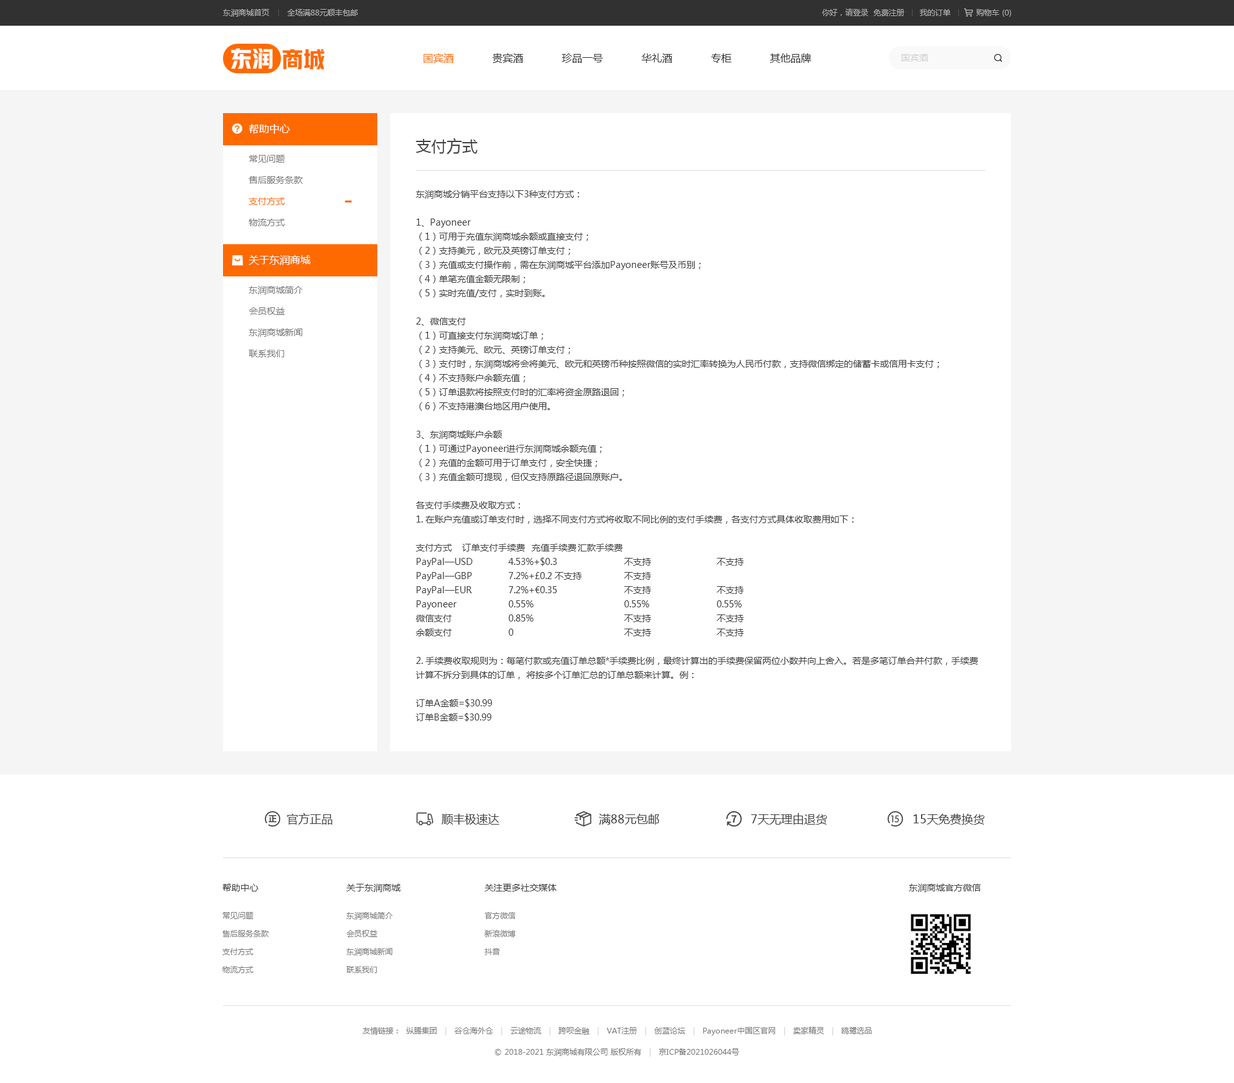
<style>
.page{position:relative;width:1234px;height:1083px;background:#ffffff}
.page>*{position:absolute;margin:0}
.t1{font:7.7px "MicrosoftYaHei";color:#b0b0b0}
.t2{font:7.7px "MicrosoftYaHei";color:#acacac}
.t3{font:21.9px "HYYakuHei-HEW";color:#ffffff}
.t4{font:21.9px "HYYakuHei-HEW";color:#ff6a00}
.t5{font:10.3px "MicrosoftYaHei";color:#333333}
.t6{font:10.3px "MicrosoftYaHei";color:#ff6a00}
.t7{font:9px "MicrosoftYaHei";color:#d2d2d2}
.t8{font:10.3px "MicrosoftYaHei";color:#ffffff}
.t9{font:15.4px "MicrosoftYaHei";color:#434343}
.t10{font:9px/21.2px "MicrosoftYaHei";color:#7d7d7d}
.t11{font:9px/21.2px "MicrosoftYaHei";color:#ff6a00}
.t12{font:9px/14.1px "MicrosoftYaHei";color:#434343}
.t13{font:11.6px "MicrosoftYaHei";color:#434343}
.t14{font:9px "MicrosoftYaHei";color:#434343}
.t15{font:7.7px/18px "MicrosoftYaHei";color:#7d7d7d}
.t16{font:7.7px "MicrosoftYaHei";color:#7d7d7d}
.t17{font:7.7px "MicrosoftYaHei";color:#d2d2d2}
</style>
<div class="page">
<p class="t1" style="left:223px;top:9px;width:135px;height:8px">东润商城首页       全场满88元顺丰包邮</p>
<p class="t2" style="left:822px;top:8px;width:190px;height:9px">你好，请登录  免费注册      我的订单          购物车 (0)</p>
<p class="t3" style="left:231px;top:48px;width:42px;height:21px">东润</p>
<p class="t4" style="left:282px;top:49px;width:43px;height:20px">商城</p>
<p class="t5" style="left:424px;top:53px;width:387px;height:10px"><span class="t6">国宾酒</span>            贵宾酒            珍品一号            华礼酒            专柜            其他品牌</p>
<p class="t7" style="left:902px;top:54px;width:26px;height:8px">国宾酒</p>
<p class="t8" style="left:249px;top:124px;width:41px;height:10px">帮助中心</p>
<p class="t9" style="left:416px;top:138px;width:62px;height:16px">支付方式</p>
<p class="t10" style="left:249px;top:155px;width:54px;height:71px">常见问题<br>售后服务条款<br><span class="t11">支付方式<br></span>物流方式</p>
<p class="t12" style="left:416px;top:190px;width:562px;height:532px">东润商城分销平台支持以下3种支付方式：<br><br>1、Payoneer<br>（1）可用于充值东润商城余额或直接支付；<br>（2）支持美元，欧元及英镑订单支付；<br>（3）充值或支付操作前，需在东润商城平台添加Payoneer账号及币别；<br>（4）单笔充值金额无限制；<br>（5）实时充值/支付，实时到账。<br><br>2、微信支付<br>（1）可直接支付东润商城订单；<br>（2）支持美元、欧元、英镑订单支付；<br>（3）支付时，东润商城将会将美元、欧元和英镑币种按照微信的实时汇率转换为人民币付款，支持微信绑定的储蓄卡或信用卡支付；<br>（4）不支持账户余额充值；<br>（5）订单退款将按照支付时的汇率将资金原路退回；<br>（6）不支持港澳台地区用户使用。<br><br>3、东润商城账户余额<br>（1）可通过Payoneer进行东润商城余额充值；<br>（2）充值的金额可用于订单支付，安全快捷；<br>（3）充值金额可提现，但仅支持原路径退回原账户。<br><br>各支付手续费及收取方式：<br>1. 在账户充值或订单支付时，选择不同支付方式将收取不同比例的支付手续费，各支付方式具体收取费用如下：<br> <br>支付方式 订单支付手续费 充值手续费 汇款手续费<br>PayPal—USD  4.53%+$0.3   不支持   不支持<br>PayPal—GBP  7.2%+£0.2 不支持  不支持<br>PayPal—EUR  7.2%+€0.35   不支持   不支持<br>Payoneer   0.55%    0.55%   0.55%<br>微信支付   0.85%    不支持   不支持<br>余额支付   0     不支持   不支持<br> <br>2. 手续费收取规则为：每笔付款或充值订单总额*手续费比例，最终计算出的手续费保留两位小数并向上舍入。若是多笔订单合并付款，手续费计算不拆分到具体的订单， 将按多个订单汇总的订单总额来计算。例：<br><br>订单A金额=$30.99<br>订单B金额=$30.99<br>使用微信支付，手续费：0.85%<br> <br>①合并支付<br>合并支付订单金额：$30.99*2=61.98<br>手续费：0.85%*$61.98=$0.52683=$0.53<br>手续费分摊到2个订单：$0.265+$0.265=$0.53<br>②非合并支付<br>A订单手续费=0.85%*$30.99=$0.263415=$0.26<br>B订单手续费=0.85%*$30.99=$0.263415=$0.26</p>
<p class="t8" style="left:249px;top:255px;width:61px;height:10px">关于东润商城</p>
<p class="t10" style="left:249px;top:286px;width:54px;height:71px">东润商城简介<br>会员权益<br>东润商城新闻<br>联系我们</p>
<p class="t13" style="left:287px;top:813px;width:45px;height:12px">官方正品</p>
<p class="t13" style="left:442px;top:814px;width:58px;height:11px">顺丰极速达</p>
<p class="t13" style="left:599px;top:814px;width:61px;height:11px">满88元包邮</p>
<p class="t13" style="left:751px;top:813px;width:76px;height:12px">7天无理由退货</p>
<p class="t13" style="left:914px;top:814px;width:71px;height:11px">15天免费换货</p>
<p class="t14" style="left:222px;top:884px;width:36px;height:8px">帮助中心</p>
<p class="t14" style="left:346px;top:884px;width:55px;height:8px">关于东润商城</p>
<p class="t14" style="left:485px;top:884px;width:72px;height:8px">关注更多社交媒体</p>
<p class="t14" style="left:909px;top:884px;width:72px;height:8px">东润商城官方微信</p>
<p class="t15" style="left:222px;top:912px;width:47px;height:61px">常见问题<br>售后服务条款<br>支付方式<br>物流方式</p>
<p class="t15" style="left:346px;top:912px;width:47px;height:61px">东润商城简介<br>会员权益<br>东润商城新闻<br>联系我们</p>
<p class="t15" style="left:485px;top:912px;width:31px;height:43px">官方微信<br>新浪微博<br>抖音</p>
<p class="t16" style="left:363px;top:1027px;width:509px;height:9px">友情链接：  纵腾集团   <span class="t17">|   </span>谷仓海外仓   <span class="t17">|   </span>云途物流   <span class="t17">|   </span>跨呗金融   <span class="t17">|   </span>VAT注册   <span class="t17">|   </span>创蓝论坛   <span class="t17">|   </span>Payoneer中国区官网   <span class="t17">|   </span>卖家精灵   <span class="t17">|   </span>鸥鹭选品</p>
<p class="t16" style="left:495px;top:1048px;width:244px;height:9px">© 2018-2021 东润商城有限公司 版权所有   <span class="t17">|   </span>京ICP备2021026044号</p>
</div>
